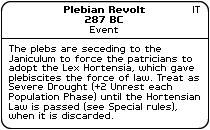
<style>
.page{position:relative;width:210px;height:130px;background:#ffffff}
.page>*{position:absolute;margin:0}
.t1{font:8px "PFTempestaSeven-Bold";color:#000000}
.t2{font:8px "PFTempestaSeven";color:#000000}
</style>
<div class="page">
<p class="t1" style="left:64px;top:6px;width:81px;height:17px;text-align:center">Plebian Revolt<br>287 BC</p>
<p class="t2" style="left:193px;top:6px;width:7px;height:7px">IT</p>
<p class="t2" style="left:90px;top:26px;width:28px;height:7px">Event</p>
<p class="t2" style="left:9px;top:45px;width:191px;height:74px">The plebs are seceding to the<br>Janiculum to force the patricians to<br>adopt the Lex Hortensia, which gave<br>plebiscites the force of law. Treat as<br>Severe Drought (+2 Unrest each<br>Population Phase) until the Hortensian<br>Law is passed (see Special rules),<br>when it is discarded.</p>
</div>
